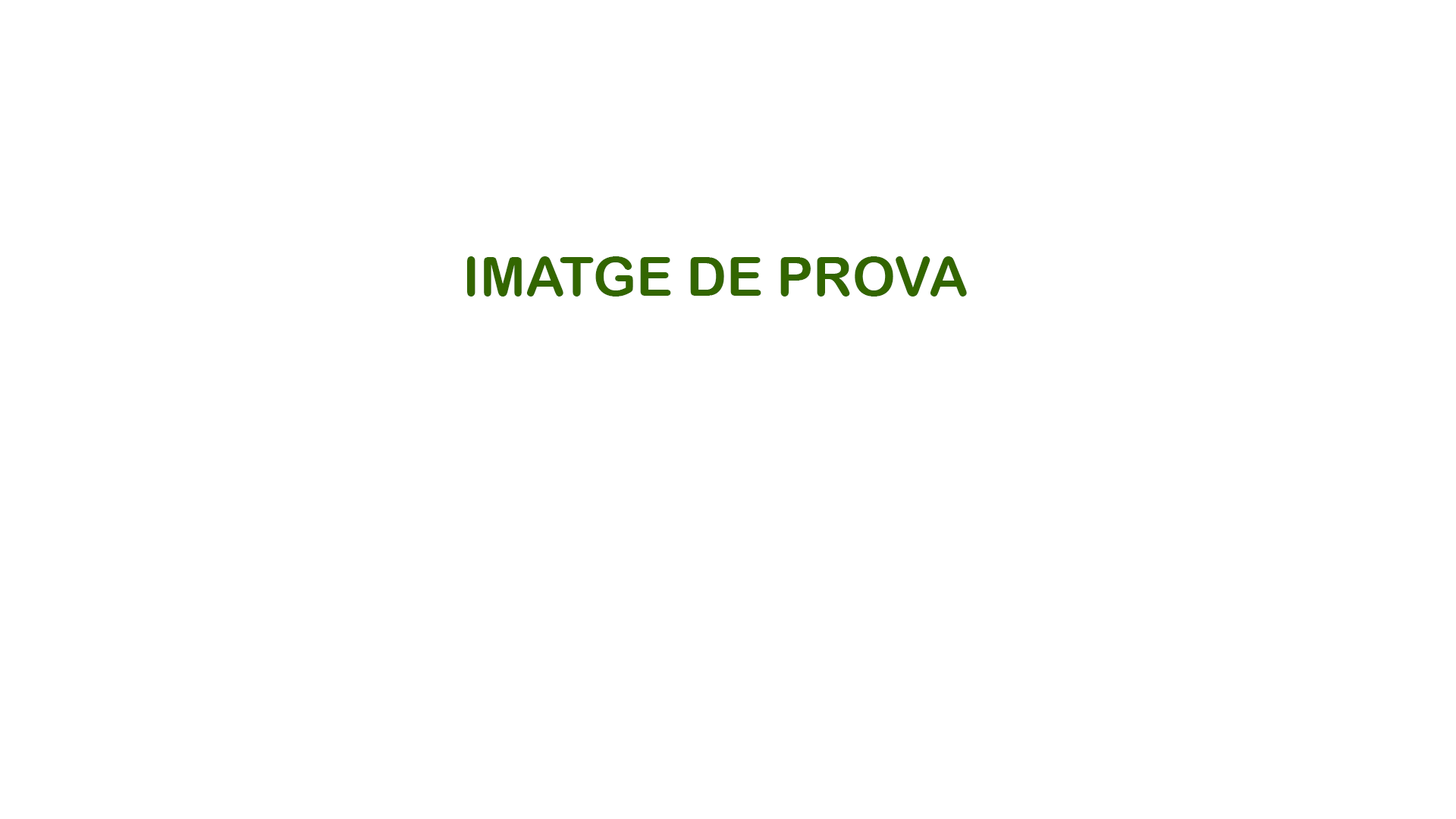
<style>
.page{position:relative;width:1456px;height:819px;background:#ffffff}
.page>*{position:absolute;margin:0}
.t1{font:54.6px "ArialRoundedMTBold";color:#336600}
</style>
<div class="page">
<p class="t1" style="left:467px;top:256px;width:500px;height:41px">IMATGE DE PROVA</p>
</div>
